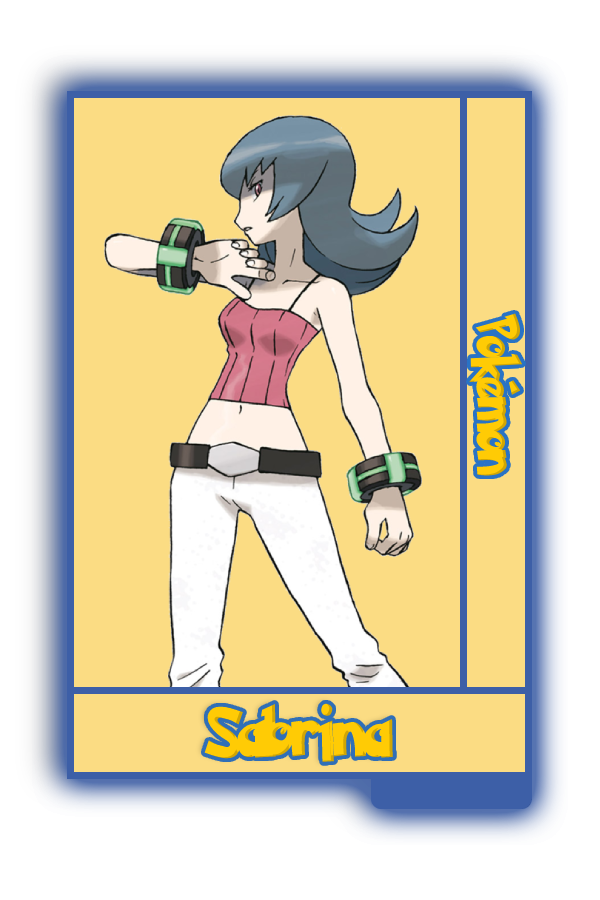
<style>
.page{position:relative;width:600px;height:900px;background:#fbdc83}
.page>*{position:absolute;margin:0}
.t1{font:48.8px "PokemonSolidNormal";color:#ffcb05;scale:0.8 1}
.t2{font:56.6px "PokemonSolidNormal";color:#ffcb05;scale:0.92 1}
</style>
<div class="page">
<p class="t1" style="left:469px;top:313px;width:54px;height:163px;rotate:90deg">Pokémon</p>
<p class="t2" style="left:204px;top:703px;width:189px;height:59px">Sabrina</p>
</div>
